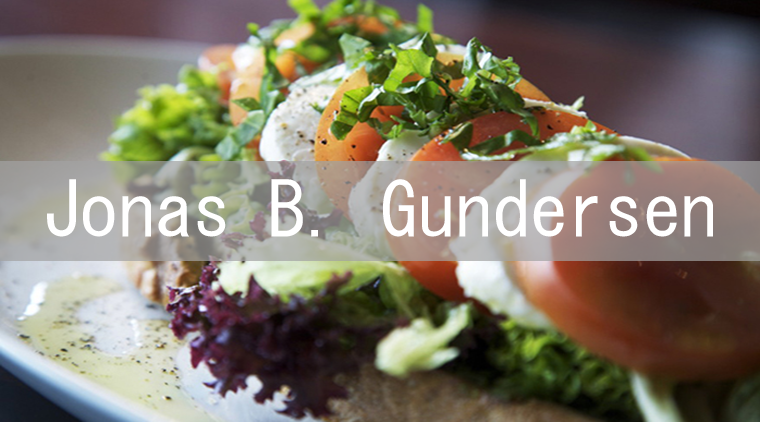
<style>
.page{position:relative;width:760px;height:422px}
.page>*{position:absolute;margin:0}
.t1{font:75px "MS-Gothic";color:#ffffff}
</style>
<div class="page">
<p class="t1" style="left:47px;top:179px;width:666px;height:58px">Jonas B. Gundersen</p>
</div>
